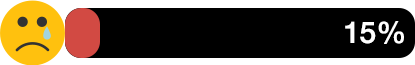
<style>
.page{position:relative;width:415px;height:65px;background:#000000}
.page>*{position:absolute;margin:0}
.t1{font:30px "HelveticaNeueCyr-Medium";color:#ffffff}
</style>
<div class="page">
<p class="t1" style="left:345px;top:21px;width:59px;height:23px">15%</p>
</div>
